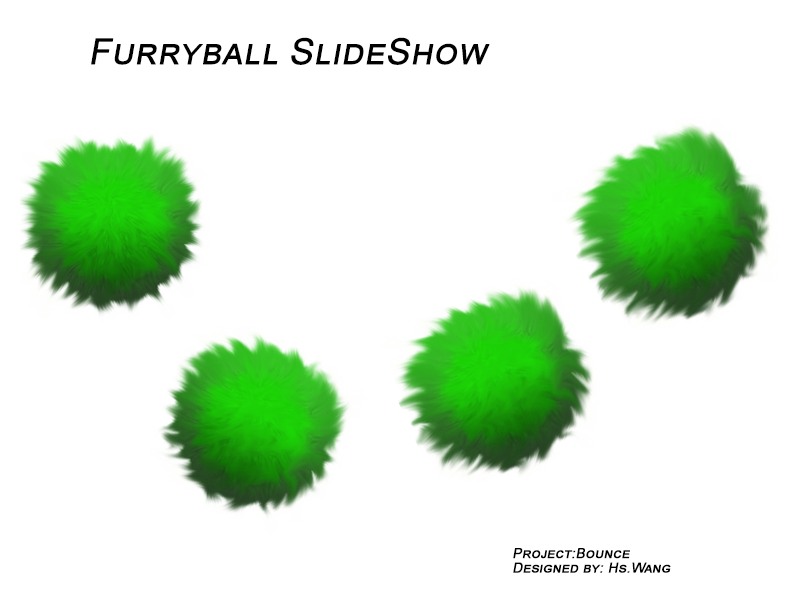
<style>
.page{position:relative;width:800px;height:600px;background:#ffffff}
.page>*{position:absolute;margin:0}
.t1{font:36px "ArialMT";color:#010101;font-variant:small-caps;font-weight:bold;font-style:italic}
.t2{font:14px/7.2px "ArialMT";color:#000000;font-variant:small-caps;font-weight:bold;font-style:italic}
</style>
<div class="page">
<p class="t1" style="left:91px;top:37px;width:399px;height:28px">Furryball SlideShow</p>
<p class="t2" style="left:513px;top:548px;width:158px;height:25px">Project:Bounce    <br><br>Designed by: Hs.Wang</p>
</div>
